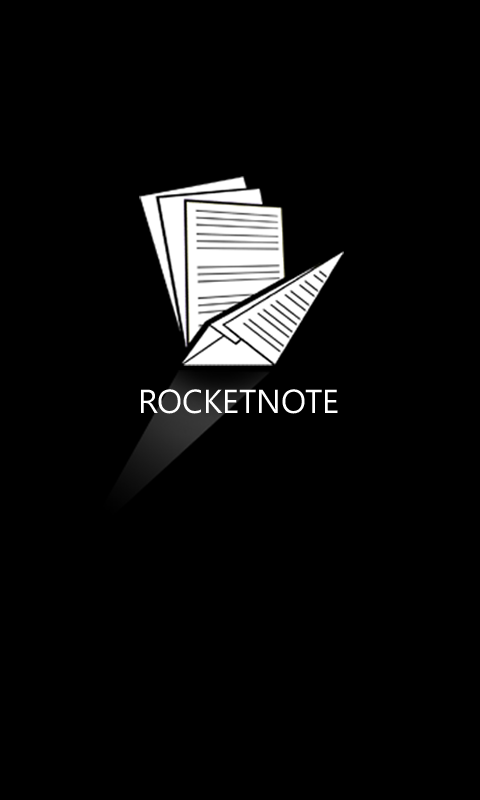
<style>
.page{position:relative;width:480px;height:800px;background:#000000}
.page>*{position:absolute;margin:0}
.t1{font:33.2px "SegoeWP";color:#ffffff}
</style>
<div class="page">
<p class="t1" style="left:141px;top:389px;width:197px;height:25px">ROCKETNOTE</p>
</div>
